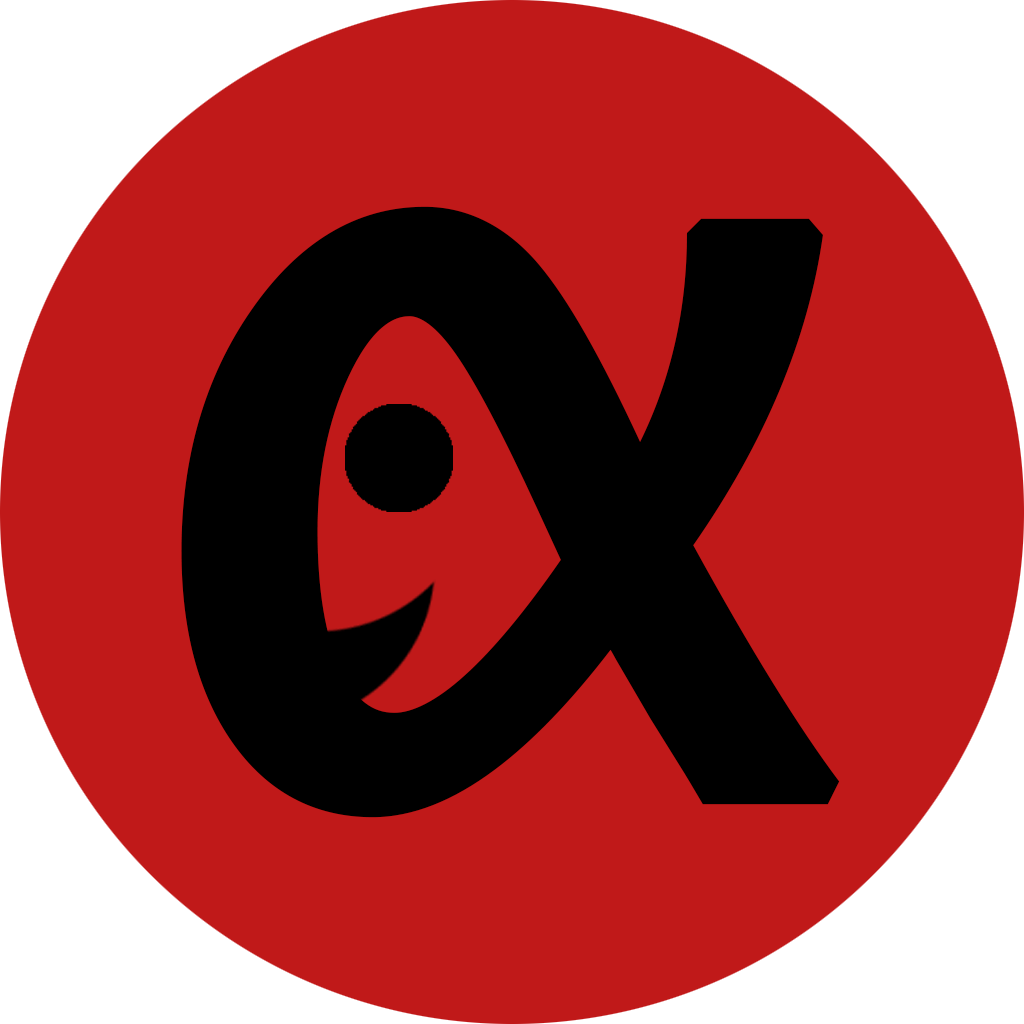
<style>
.page{position:relative;width:1024px;height:1024px;background:#c01919}
.page>*{position:absolute;margin:0}
.t1{font:1050px "LucidaSansUnicode";color:#000000;font-weight:bold}
</style>
<div class="page">
<p class="t1" style="left:181px;top:206px;width:659px;height:612px">α</p>
</div>
